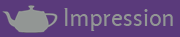
<style>
.page{position:relative;width:180px;height:37px;background:#5a3a7b}
.page>*{position:absolute;margin:0}
.t1{font:24px "Rosario";color:#929694}
</style>
<div class="page">
<p class="t1" style="left:64px;top:8px;width:109px;height:23px">Impression</p>
</div>
